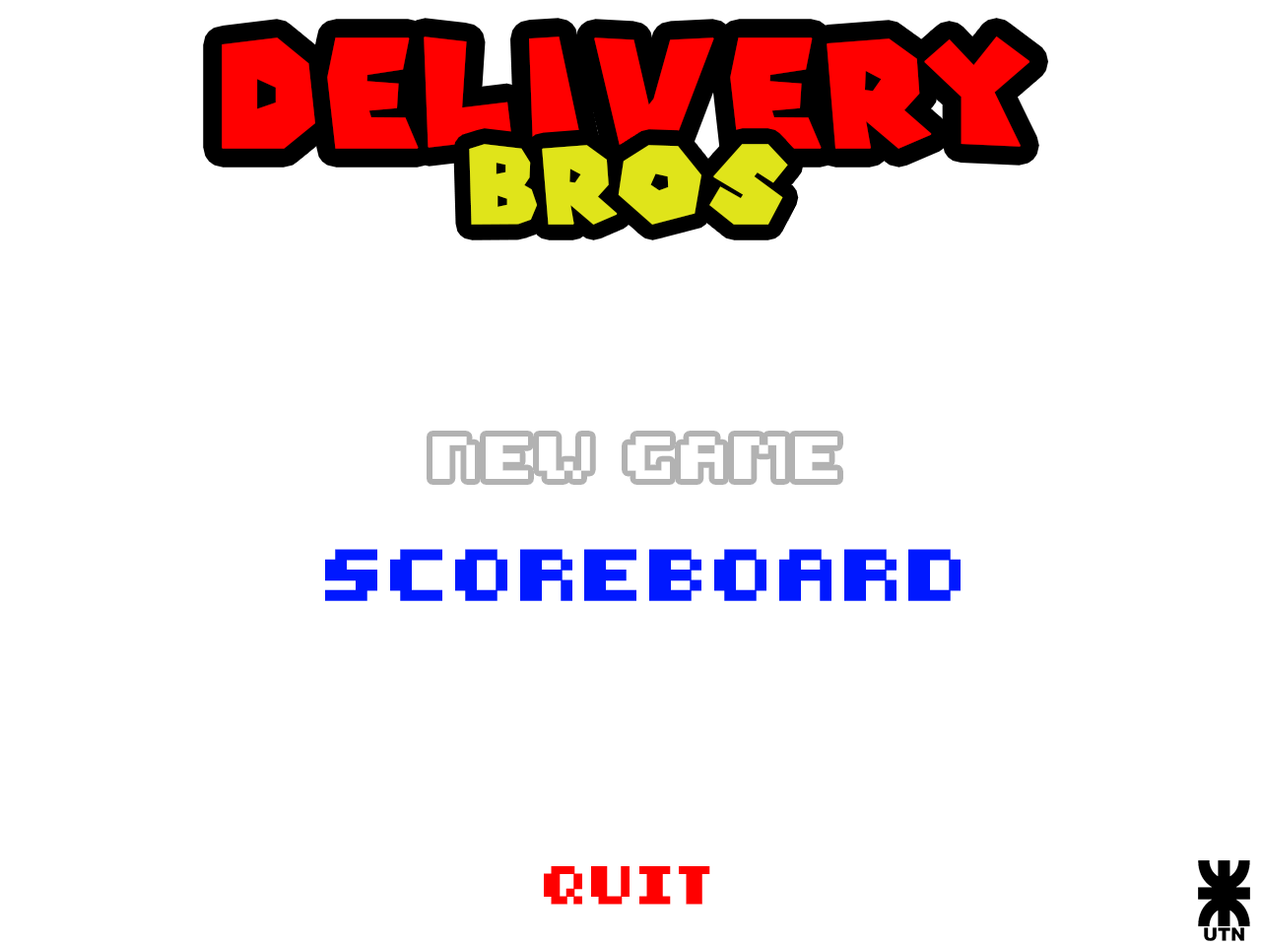
<style>
.page{position:relative;width:1261px;height:946px;background:#ffffff}
.page>*{position:absolute;margin:0}
.t1{font:147px "SuperMarioGalaxy";letter-spacing:0.05em;color:#ff0000;font-weight:bold}
.t2{font:105.3px "SuperMarioGalaxy";letter-spacing:0.05em;color:#e0e41a;font-weight:bold}
.t3{font:42.2px "8-bit-HUD";letter-spacing:0.05em;color:#ffffff}
.t4{font:50.8px "8-bit-HUD";letter-spacing:0.05em;color:#0018ff;font-weight:bold}
.t5{font:37.4px "8-bit-HUD";letter-spacing:0.05em;color:#ff0000;font-weight:bold}
</style>
<div class="page">
<p class="t1" style="left:222px;top:36px;width:807px;height:113px">delivery</p>
<p class="t2" style="left:469px;top:144px;width:319px;height:81px">bros</p>
<p class="t3" style="left:432px;top:436px;width:405px;height:43px">new game</p>
<p class="t4" style="left:325px;top:549px;width:635px;height:52px">scoreboard</p>
<p class="t5" style="left:544px;top:866px;width:166px;height:38px">quit</p>
</div>
